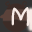
<style>
.page{position:relative;width:32px;height:32px;background:#333333}
.page>*{position:absolute;margin:0}
.t1{font:20px "KristenITC-Regular";letter-spacing:0.03em;color:#f8ebe6}
</style>
<div class="page">
<p class="t1" style="left:11px;top:7px;width:19px;height:20px">M</p>
</div>
